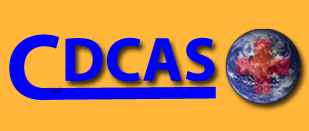
<style>
.page{position:relative;width:309px;height:131px;background:#ffb639}
.page>*{position:absolute;margin:0}
.t1{font:94.3px "MyriadPro-Bold";color:#0000ff}
.t2{font:62.9px "MyriadPro-Bold";color:#0000ff}
</style>
<div class="page">
<p class="t1" style="left:9px;top:34px;width:50px;height:66px">C</p>
<p class="t2" style="left:65px;top:37px;width:150px;height:45px">DCAS</p>
</div>
